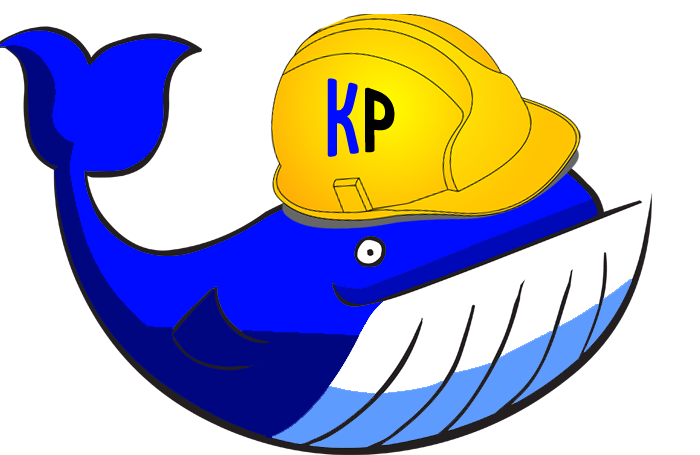
<style>
.page{position:relative;width:700px;height:455px;background:#ffffff}
.page>*{position:absolute;margin:0}
.t1{font:66.7px "Calibri-Bold";color:#000cff}
.t2{font:66.7px "Calibri-Bold";color:#000000}
</style>
<div class="page">
<p class="t1" style="left:327px;top:78px;width:68px;height:79px">К<span class="t2">Р</span></p>
</div>
